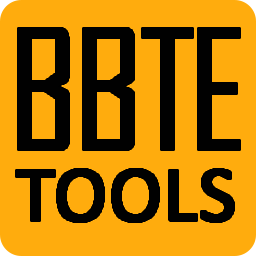
<style>
.page{position:relative;width:256px;height:256px;background:#ffac0d}
.page>*{position:absolute;margin:0}
.t1{font:158.2px "AgencyFB-Reg";color:#010101;font-weight:bold}
.t2{font:79px "Calibri";color:#010101;font-weight:bold}
</style>
<div class="page">
<p class="t1" style="left:18px;top:28px;width:222px;height:122px">BBTE</p>
<p class="t2" style="left:16px;top:169px;width:218px;height:53px">TOOLS</p>
</div>
